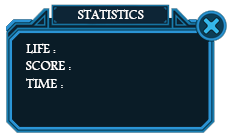
<style>
.page{position:relative;width:231px;height:139px;background:#0a1c27}
.page>*{position:absolute;margin:0}
.t1{font:14px "Andalus";color:#ffffff}
</style>
<div class="page">
<p class="t1" style="left:78px;top:9px;width:66px;height:10px">STATISTICS</p>
<p class="t1" style="left:26px;top:43px;width:30px;height:11px">LIFE :</p>
<p class="t1" style="left:26px;top:61px;width:45px;height:9px">SCORE :</p>
<p class="t1" style="left:26px;top:78px;width:37px;height:10px">TIME :</p>
</div>
